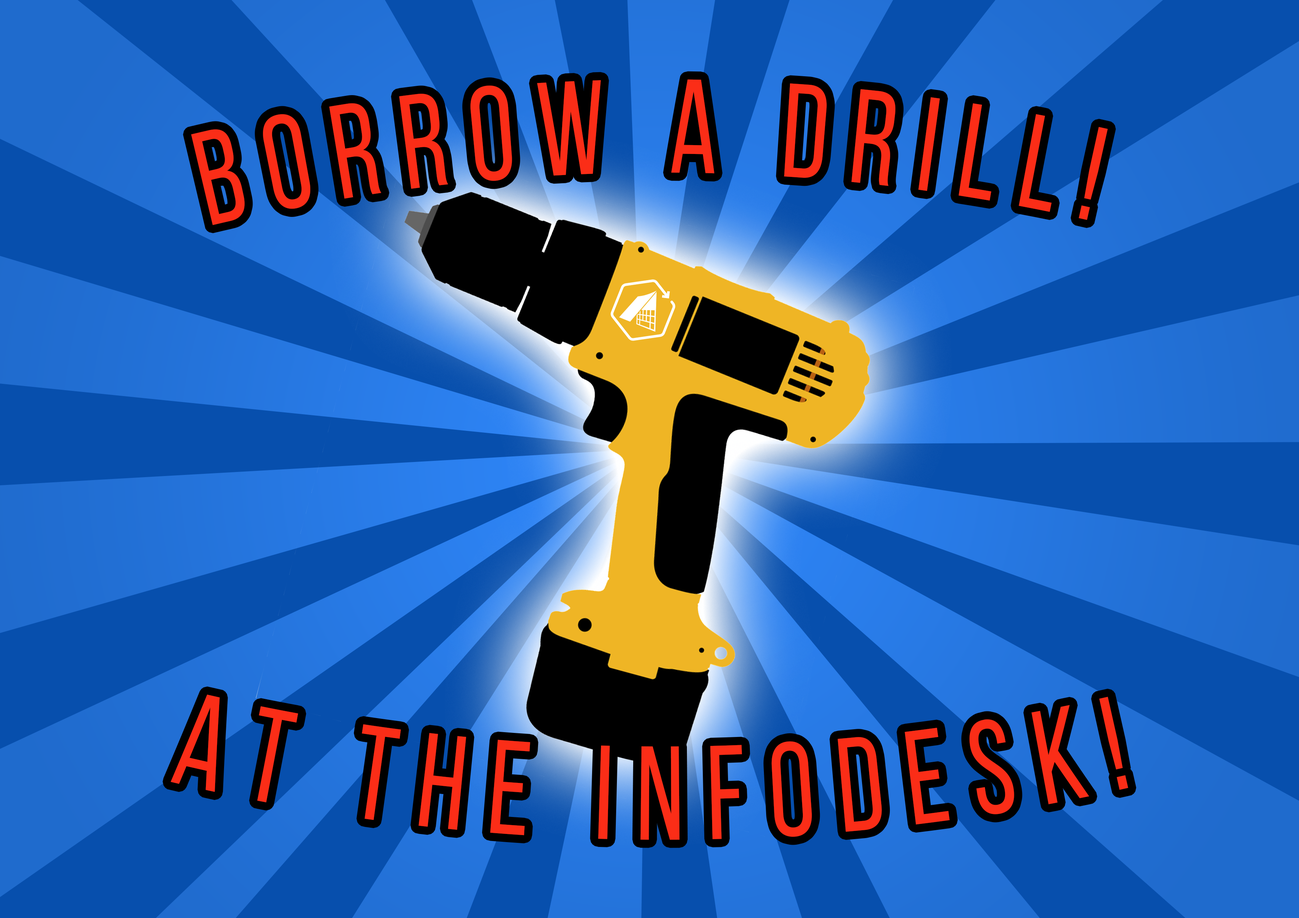
<style>
.page{position:relative;width:1299px;height:918px;background:#074fad}
.page>*{position:absolute;margin:0}
.t1{font:133.3px "BebasNeueRegular";letter-spacing:0.2em;color:#fb2d17;scale:0.83 1}
</style>
<div class="page">
<p class="t1" style="left:191px;top:79px;width:917px;height:146px">BORROW A DRILL!</p>
<p class="t1" style="left:171px;top:695px;width:957px;height:145px">AT THE INFODESK!</p>
</div>
